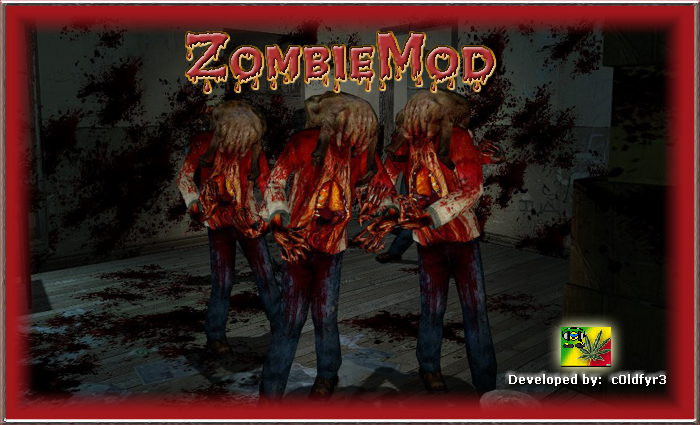
<style>
.page{position:relative;width:700px;height:425px}
.page>*{position:absolute;margin:0}
.t1{font:72px "CreepyRegular"}
.t2{font:12px "Verdana-Bold";color:#fefbfb}
</style>
<div class="page">
<p class="t1" style="left:187px;top:33px;width:307px;height:59px">ZombieMod</p>
<p class="t2" style="left:509px;top:374px;width:157px;height:12px">Developed by:  c0ldfyr3</p>
</div>
